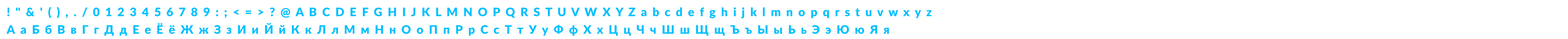
<style>
.page{position:relative;width:1568px;height:39px;background:#ffffff}
.page>*{position:absolute;margin:0}
.t1{font:11.8px/5.9px "Lato-Black";color:#04c0ff}
</style>
<div class="page">
<p class="t1" style="left:6px;top:7px;width:926px;height:29px">!  "  &amp;  '  (  )  ,  .  /  0  1  2  3  4  5  6  7  8  9  :  ;  &lt;  =  &gt;  ?  @  A  B  C  D  E  F  G  H  I  J  K  L  M  N  O  P  Q  R  S  T  U  V  W  X  Y  Z  a  b  c  d  e  f  g  h  i  j  k  l  m  n  o  p  q  r  s  t  u  v  w  x  y  z  <br><br><br>А  а  Б  б  В  в  Г  г  Д  д  Е  е  Ё  ё  Ж  ж  З  з  И  и  Й  й  К  к  Л  л  М  м  Н  н  О  о  П  п  Р  р  С  с  Т  т  У  у  Ф  ф  Х  х  Ц  ц  Ч  ч  Ш  ш  Щ  щ  Ъ  ъ  Ы  ы  Ь  ь  Э  э  Ю  ю  Я  я</p>
</div>
